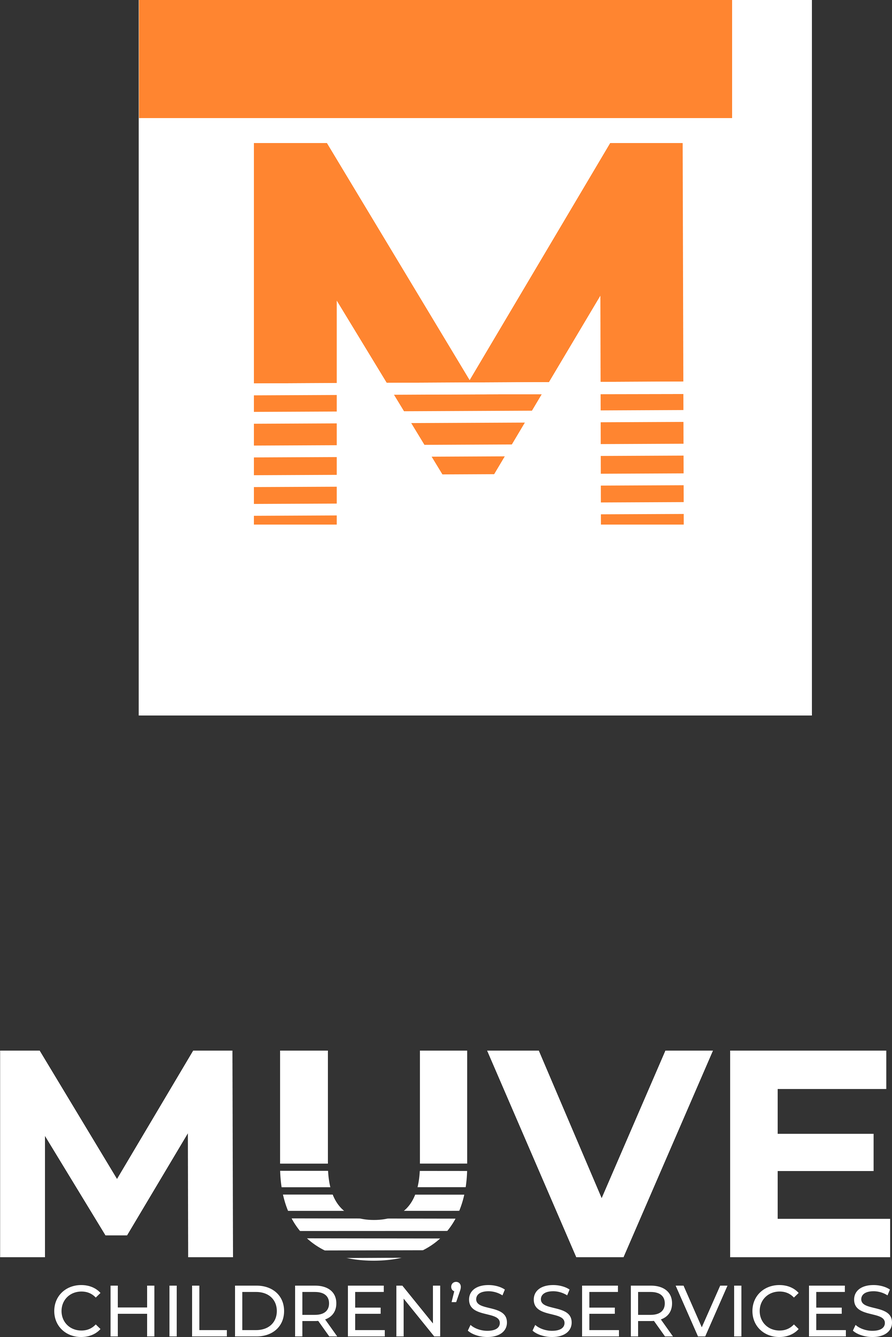
<style>
.page{position:relative;width:892px;height:1337px;background:#333333}
.page>*{position:absolute;margin:0}
.t1{font:72.5px "Montserrat-Medium";color:#ffffff}
</style>
<div class="page">
<p class="t1" style="left:54px;top:1282px;width:838px;height:55px">CHILDREN’S SERVICES</p>
</div>
